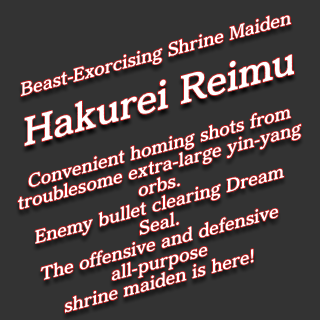
<style>
.page{position:relative;width:320px;height:320px;background:#333333}
.page>*{position:absolute;margin:0}
.t1{font:16px "ModeMinALargeStd-B";color:#ffffff;scale:1.04 1}
.t2{font:34px "ModeMinALargeStd-B";color:#ffffff;scale:1.04 1}
</style>
<div class="page">
<p class="t1" style="left:21px;top:14px;width:270px;height:83px;rotate:-15deg">Beast-Exorcising Shrine Maiden</p>
<p class="t2" style="left:24px;top:54px;width:271px;height:92px;rotate:-15deg">Hakurei Reimu</p>
<p class="t1" style="left:18px;top:108px;width:284px;height:205px;text-align:center;rotate:-15deg">Convenient homing shots from<br>troublesome extra-large yin-yang orbs.<br>Enemy bullet clearing Dream Seal.<br>The offensive and defensive all-purpose<br>shrine maiden is here!</p>
</div>
